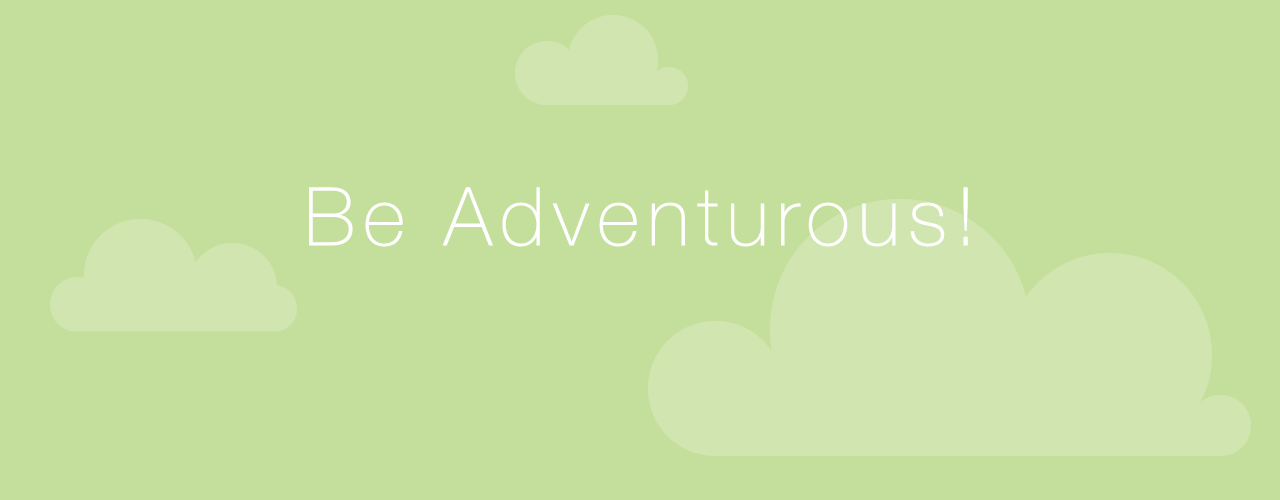
<style>
.page{position:relative;width:1280px;height:500px;background:#c4df9b}
.page>*{position:absolute;margin:0}
.t1{font:81px "HelveticaNeue-Thin";letter-spacing:0.1em;color:#ffffff}
</style>
<div class="page">
<p class="t1" style="left:309px;top:187px;width:659px;height:60px">Be Adventurous!</p>
</div>
